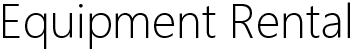
<style>
.page{position:relative;width:355px;height:51px;background:#ffffff}
.page>*{position:absolute;margin:0}
.t1{font:48px "SegoeLight";color:#000000}
</style>
<div class="page">
<p class="t1" style="left:3px;top:2px;width:347px;height:47px">Equipment Rental</p>
</div>
